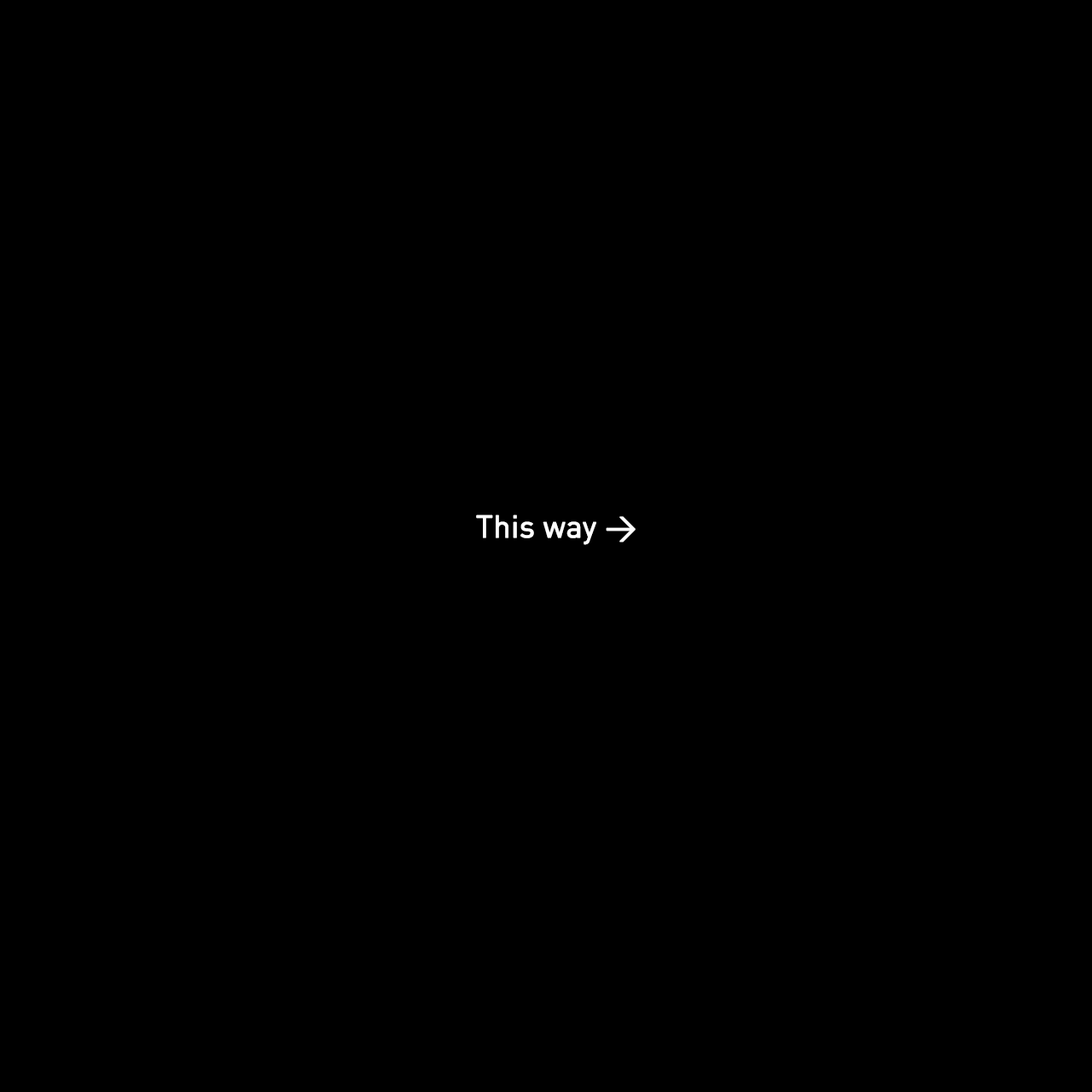
<style>
.page{position:relative;width:1092px;height:1092px;background:#000000}
.page>*{position:absolute;margin:0}
.t1{font:30.7px "DIN-Regular";letter-spacing:-0.01em;color:#ffffff;font-weight:bold}
</style>
<div class="page">
<p class="t1" style="left:476px;top:514px;width:160px;height:31px">This way &gt;</p>
</div>
